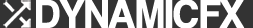
<style>
.page{position:relative;width:253px;height:28px;background:#333333}
.page>*{position:absolute;margin:0}
.t1{font:38.2px "Helvetica-Bold";letter-spacing:-0.075em;color:#ffffff;font-weight:bold}
</style>
<div class="page">
<p class="t1" style="left:36px;top:0px;width:209px;height:29px">DYNAMICFX</p>
</div>
